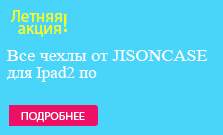
<style>
.page{position:relative;width:223px;height:135px;background:#49d5f9}
.page>*{position:absolute;margin:0}
.t1{font:17px "MyriadPro-Regular";color:#fcff00}
.t2{font:26px "MyriadPro-Regular";color:#fcff00}
.t3{font:17px "TimesNewRomanPSMT";color:#ffffff;scale:1.06 1}
.t4{font:17px "TimesNewRomanPSMT";color:#ffffff}
.t5{font:11px "MyriadPro-Regular";color:#fefefe;scale:1.09 1}
</style>
<div class="page">
<p class="t1" style="left:10px;top:10px;width:52px;height:12px">Летняя</p>
<p class="t2" style="left:63px;top:14px;width:4px;height:18px">!</p>
<p class="t1" style="left:18px;top:25px;width:43px;height:12px">акция</p>
<p class="t3" style="left:7px;top:50px;width:201px;height:11px">Все чехлы от JISONCASE</p>
<p class="t4" style="left:7px;top:66px;width:90px;height:16px">для Ipad2 по</p>
<p class="t5" style="left:21px;top:112px;width:64px;height:10px">ПОДРОБНЕЕ</p>
</div>
